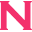
<style>
.page{position:relative;width:32px;height:32px;background:#f3306c}
.page>*{position:absolute;margin:0}
.t1{font:42.7px "CopperplateGothic-Bold";color:#f3306c}
</style>
<div class="page">
<p class="t1" style="left:0px;top:1px;width:32px;height:29px">N</p>
</div>
